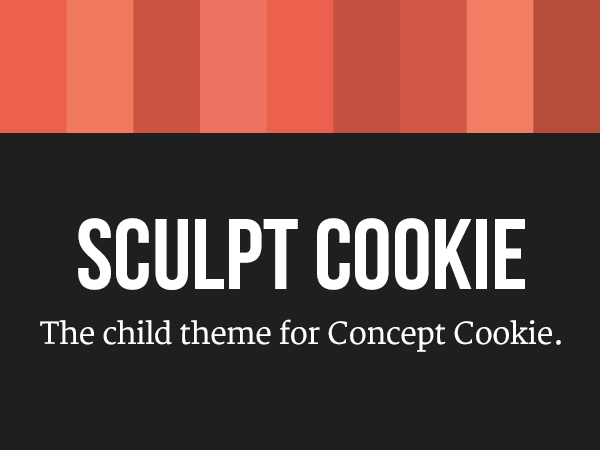
<style>
.page{position:relative;width:600px;height:450px;background:#1f1f1f}
.page>*{position:absolute;margin:0}
.t1{font:100px "BebasNeue";color:#ffffff}
.t2{font:30px "Merriweather";color:#ffffff}
</style>
<div class="page">
<p class="t1" style="left:78px;top:218px;width:447px;height:72px">Sculpt Cookie</p>
<p class="t2" style="left:40px;top:319px;width:521px;height:33px">The child theme for Concept Cookie.</p>
</div>
